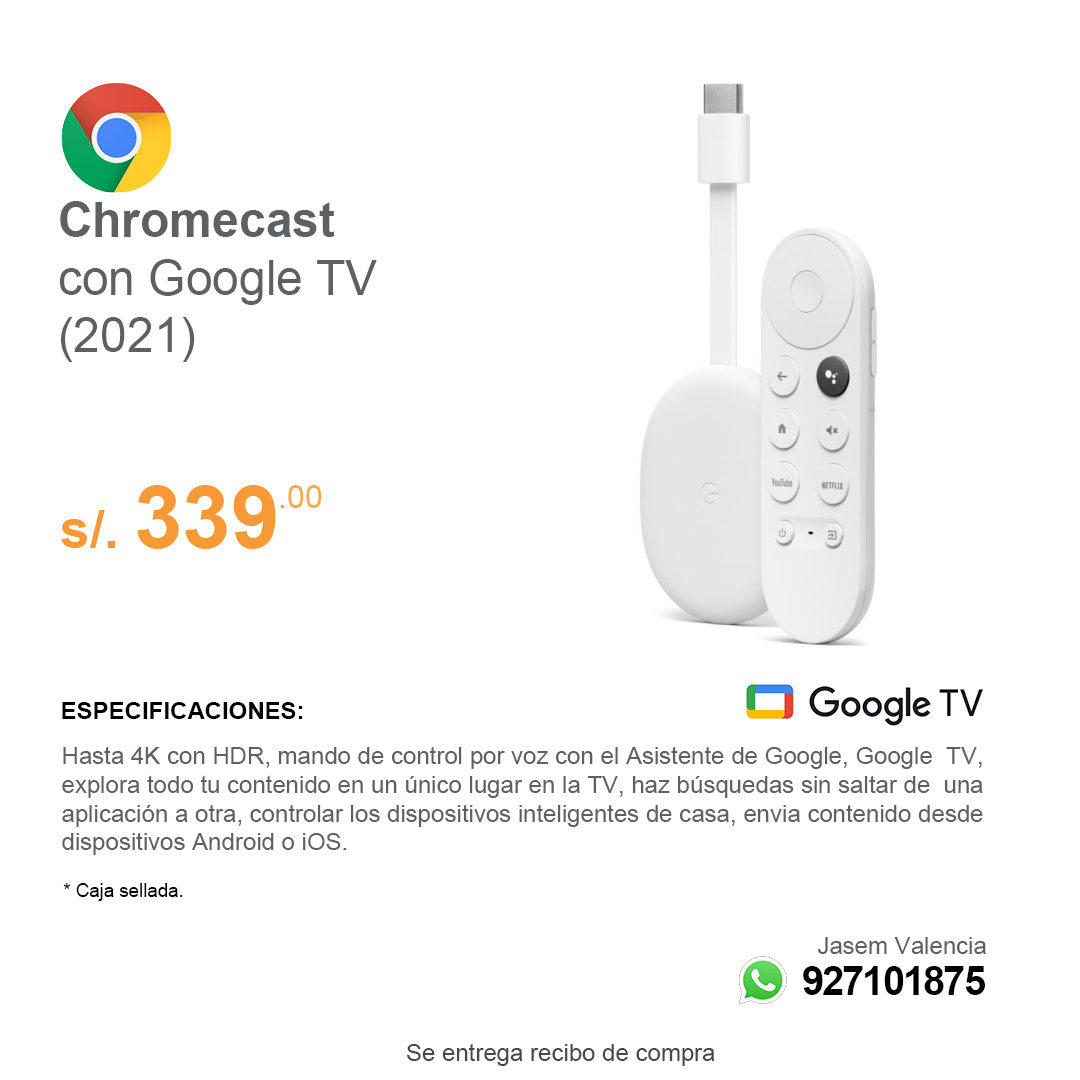
<style>
.page{position:relative;width:1080px;height:1080px;background:#ffffff}
.page>*{position:absolute;margin:0}
.t1{font:48px "ArialMT";color:#5e6062}
.t2{font:48px "Arial-BoldMT";color:#5e6062}
.t3{font:53.3px "Arial-BoldMT";color:#f79a36}
.t4{font:86.7px "Arial-BoldMT";color:#f79a36}
.t5{font:32px "ArialMT";color:#f9a953}
.t6{font:24px "Arial-BoldMT";color:#000000}
.t7{font:24px "ArialMT";color:#5e6062}
.t8{font:18.7px "ArialMT";color:#000000}
.t9{font:40px "Arial-BoldMT";letter-spacing:-0.05em;color:#000000}
.t10{font:24px "ArialMT";color:#4a4747}
</style>
<div class="page">
<p class="t1" style="left:59px;top:201px;width:318px;height:161px"><span class="t2">Chromecast</span> <br>con Google TV<br>(2021)</p>
<p class="t3" style="left:61px;top:485px;width:215px;height:64px">s/. <span class="t4">339</span></p>
<p class="t5" style="left:280px;top:485px;width:42px;height:23px">.00</p>
<p class="t6" style="left:62px;top:702px;width:241px;height:17px">ESPECIFICACIONES:</p>
<p class="t7" style="left:62px;top:746px;width:921px;height:109px">Hasta 4K con HDR, mando de control por voz con el Asistente de Google, Google  TV, <br>explora todo tu contenido en un único lugar en la TV, haz búsquedas sin saltar de  una<br>aplicación a otra, controlar los dispositivos inteligentes de casa, envia contenido desde <br>dispositivos Android o iOS.</p>
<p class="t8" style="left:63px;top:883px;width:120px;height:18px">* Caja sellada.</p>
<p class="t7" style="left:818px;top:937px;width:168px;height:17px">Jasem Valencia</p>
<p class="t9" style="left:803px;top:966px;width:182px;height:29px">927101875</p>
<p class="t10" style="left:407px;top:1043px;width:308px;height:23px">Se entrega recibo de compra</p>
</div>
